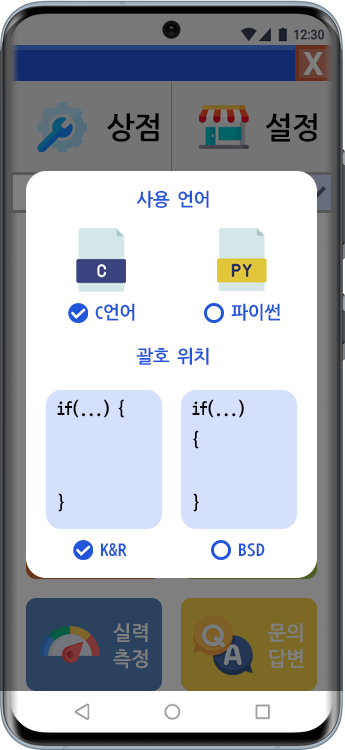
<style>
.page{position:relative;width:345px;height:750px;background:#ffffff}
.page>*{position:absolute;margin:0}
.t1{font:30px "H2gtrE";color:#7f7f7f}
.t2{font:30px "NanumGothicCoding-Bold";letter-spacing:-0.08em;color:#000000}
.t3{font:18px "NanumGothicCoding-Bold";letter-spacing:-0.08em;color:#2355da}
.t4{font:18px "NanumGothicCoding-Bold";letter-spacing:-0.08em;color:#000000}
.t5{font:18px "NanumGothicCoding-Bold";color:#2355da}
.t6{font:20px/26px "NanumGothicCoding-Bold";letter-spacing:-0.08em;color:#7f7f7f}
</style>
<div class="page">
<p class="t1" style="left:303px;top:52px;width:20px;height:23px">X</p>
<p class="t2" style="left:107px;top:113px;width:52px;height:29px">상점</p>
<p class="t2" style="left:266px;top:113px;width:51px;height:29px">설정</p>
<p class="t3" style="left:136px;top:190px;width:73px;height:19px">사용 언어</p>
<p class="t3" style="left:95px;top:303px;width:40px;height:18px">C언어</p>
<p class="t3" style="left:231px;top:303px;width:50px;height:18px">파이썬</p>
<p class="t3" style="left:136px;top:347px;width:73px;height:18px">괄호 위치</p>
<p class="t4" style="left:57px;top:399px;width:67px;height:113px">if(...) {<br>   <br><br>}</p>
<p class="t4" style="left:192px;top:399px;width:52px;height:113px">if(...)<br>{<br>   <br>}</p>
<p class="t5" style="left:100px;top:543px;width:27px;height:14px">K&amp;R</p>
<p class="t5" style="left:238px;top:543px;width:27px;height:14px">BSD</p>
<p class="t6" style="left:113px;top:623px;width:35px;height:46px">실력<br>측정</p>
<p class="t6" style="left:268px;top:623px;width:36px;height:45px">문의<br>답변</p>
</div>
